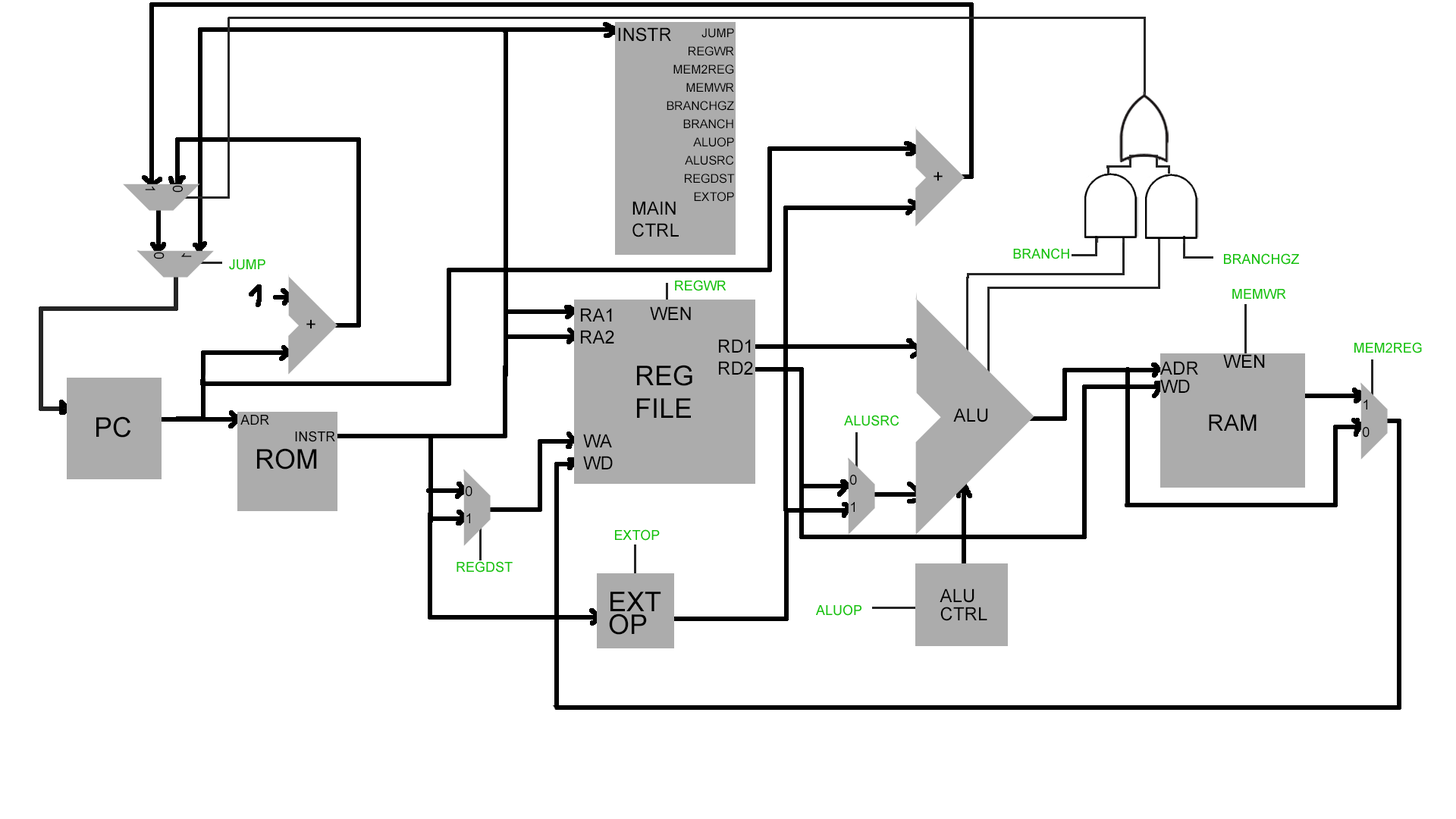
<style>
.page{position:relative;width:1456px;height:819px;background:#ffffff}
.page>*{position:absolute;margin:0}
.t1{font:18.2px "ArialMT";color:#000000}
.t2{font:12.1px/18.2px "ArialMT";color:#000000}
.t3{font:13.7px/27.4px "ArialMT";color:#000000}
.t4{font:13.6px "ArialMT";color:#15c00d}
.t5{font:27.3px "ArialMT";color:#000000}
.t6{font:18.2px/18.2px "ArialMT";color:#000000}
.t7{font:13.6px "ArialMT";color:#000000}
.t8{font:22.7px "ArialMT";color:#000000}
.t9{font:27.3px/22.7px "ArialMT";color:#000000}
</style>
<div class="page">
<p class="t1" style="left:618px;top:27px;width:53px;height:15px">INSTR</p>
<p class="t2" style="left:667px;top:28px;width:68px;height:174px;text-align:right">JUMP<br>REGWR<br>MEM2REG<br>MEMWR<br>BRANCHGZ<br>BRANCH<br>ALUOP<br>ALUSRC<br>REGDST<br>EXTOP</p>
<p class="t1" style="left:933px;top:171px;width:10px;height:10px">+</p>
<p class="t3" style="left:145px;top:185px;width:38px;height:8px;rotate:90deg">0<br>1</p>
<p class="t1" style="left:632px;top:201px;width:47px;height:36px">MAIN<br>CTRL</p>
<p class="t3" style="left:154px;top:252px;width:38px;height:7px;rotate:90deg">0<br>1</p>
<p class="t4" style="left:1013px;top:248px;width:56px;height:11px">BRANCH</p>
<p class="t4" style="left:1224px;top:253px;width:75px;height:12px">BRANCHGZ</p>
<p class="t4" style="left:229px;top:259px;width:36px;height:11px">JUMP</p>
<p class="t4" style="left:675px;top:280px;width:51px;height:11px">REGWR</p>
<p class="t4" style="left:1232px;top:289px;width:54px;height:10px">MEMWR</p>
<p class="t1" style="left:581px;top:308px;width:33px;height:36px">RA1<br>RA2</p>
<p class="t1" style="left:650px;top:306px;width:41px;height:14px">WEN</p>
<p class="t1" style="left:306px;top:319px;width:9px;height:10px">+</p>
<p class="t1" style="left:719px;top:339px;width:34px;height:36px">RD1<br>RD2</p>
<p class="t4" style="left:1354px;top:342px;width:68px;height:11px">MEM2REG</p>
<p class="t5" style="left:637px;top:365px;width:55px;height:53px">REG<br>FILE</p>
<p class="t6" style="left:1160px;top:361px;width:38px;height:32px">ADR<br>WD</p>
<p class="t1" style="left:1223px;top:354px;width:42px;height:14px">WEN</p>
<p class="t3" style="left:1363px;top:400px;width:7px;height:38px">1<br>0</p>
<p class="t1" style="left:953px;top:408px;width:35px;height:14px">ALU</p>
<p class="t5" style="left:96px;top:416px;width:35px;height:22px">PC</p>
<p class="t7" style="left:240px;top:415px;width:95px;height:27px">ADR   <br>        INSTR</p>
<p class="t4" style="left:844px;top:415px;width:55px;height:11px">ALUSRC</p>
<p class="t8" style="left:1209px;top:414px;width:48px;height:17px">RAM</p>
<p class="t1" style="left:583px;top:434px;width:30px;height:35px">WA<br>WD</p>
<p class="t5" style="left:257px;top:448px;width:60px;height:21px">ROM</p>
<p class="t3" style="left:850px;top:475px;width:7px;height:37px">0<br>1</p>
<p class="t3" style="left:466px;top:486px;width:6px;height:37px">0<br>1</p>
<p class="t4" style="left:615px;top:529px;width:45px;height:12px">EXTOP</p>
<p class="t4" style="left:457px;top:561px;width:56px;height:12px">REGDST</p>
<p class="t9" style="left:609px;top:591px;width:52px;height:44px">EXT<br>OP</p>
<p class="t6" style="left:940px;top:588px;width:47px;height:33px">ALU<br>CTRL</p>
<p class="t4" style="left:816px;top:604px;width:45px;height:12px">ALUOP</p>
</div>
